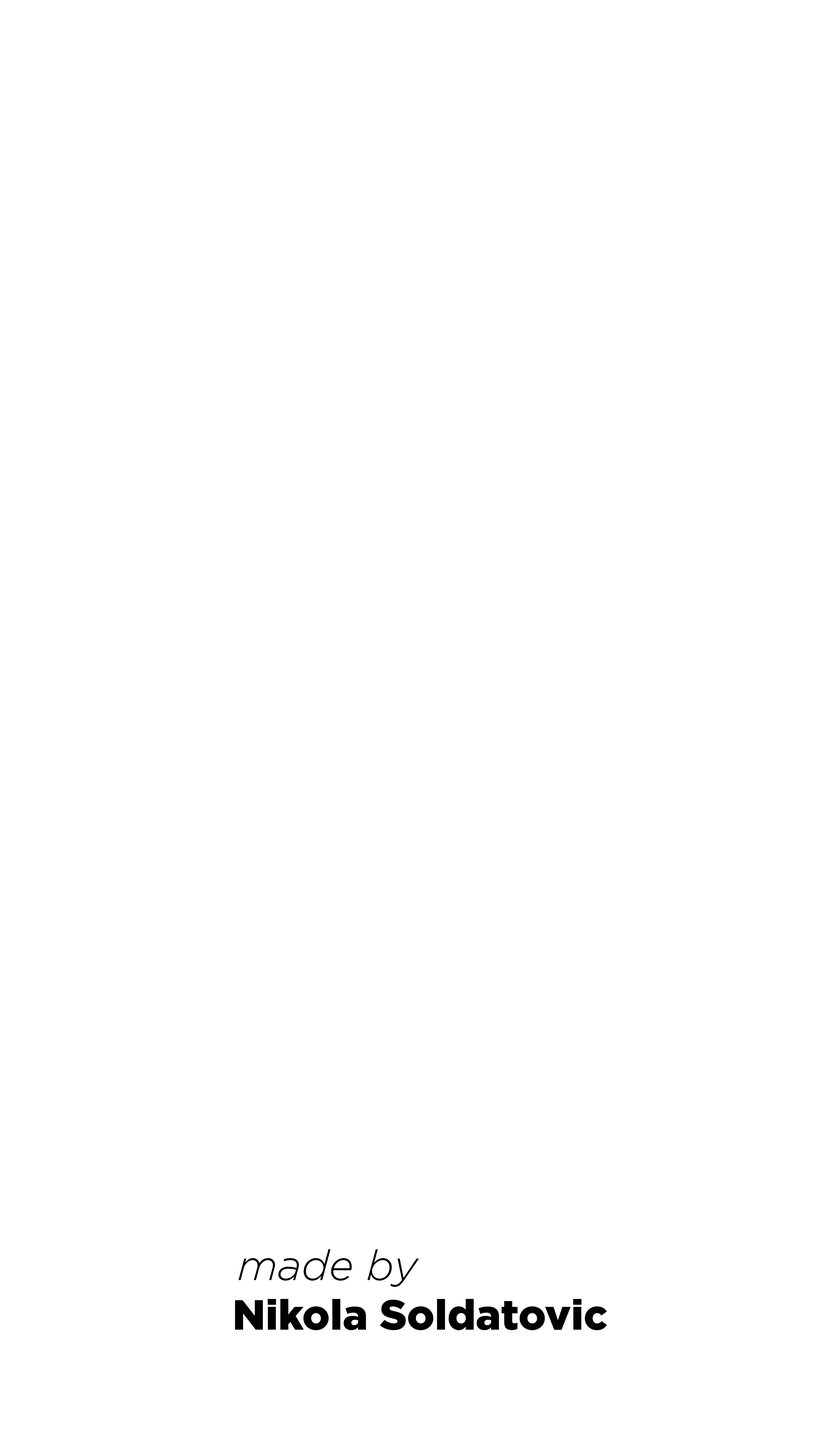
<style>
.page{position:relative;width:835px;height:1429px;background:#ffffff}
.page>*{position:absolute;margin:0}
.t1{font:42.1px "Gotham-LightItalic";color:#000000}
.t2{font:42.1px "Gotham-Black";color:#000000}
</style>
<div class="page">
<p class="t1" style="left:238px;top:1249px;width:181px;height:38px">made by</p>
<p class="t2" style="left:235px;top:1299px;width:372px;height:31px">Nikola Soldatovic</p>
</div>
